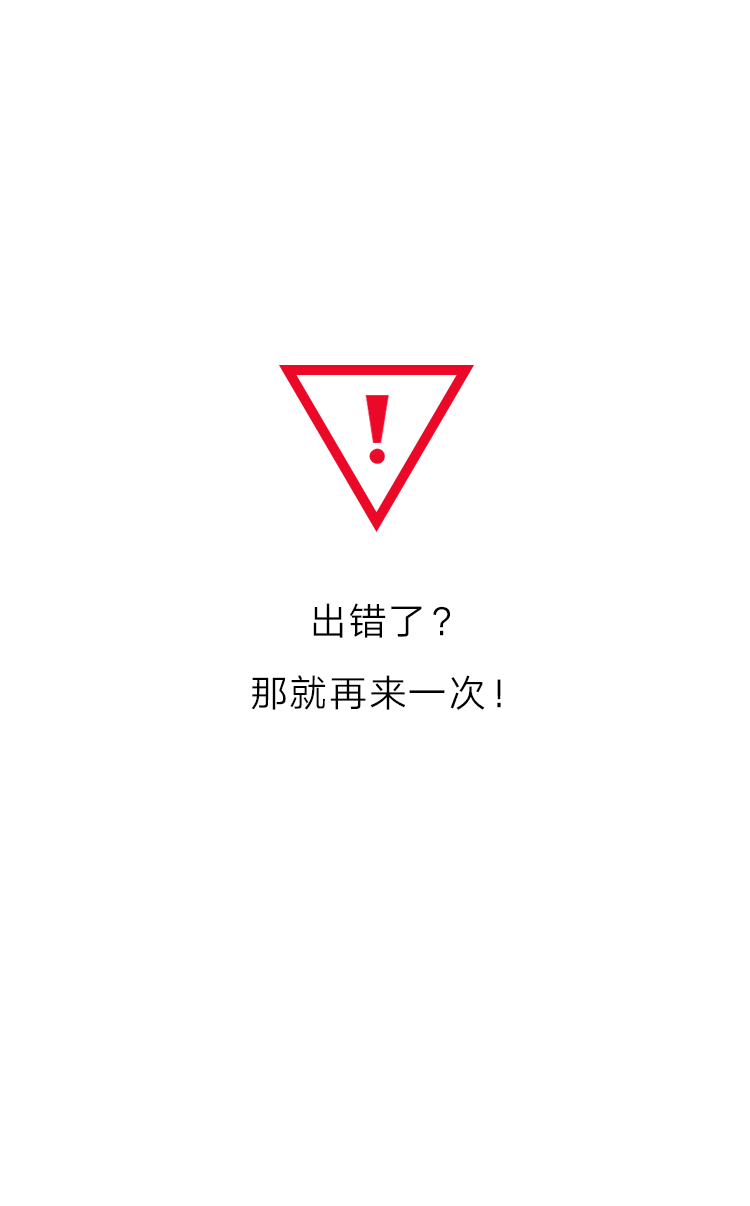
<style>
.page{position:relative;width:750px;height:1206px;background:#ffffff}
.page>*{position:absolute;margin:0}
.t1{font:38px/71.7px "HYQiHei-EZS";letter-spacing:0.04em;color:#000000;text-transform:uppercase}
</style>
<div class="page">
<p class="t1" style="left:251px;top:603px;width:250px;height:107px;text-align:center">出错了？<br>那就再来一次！</p>
</div>
